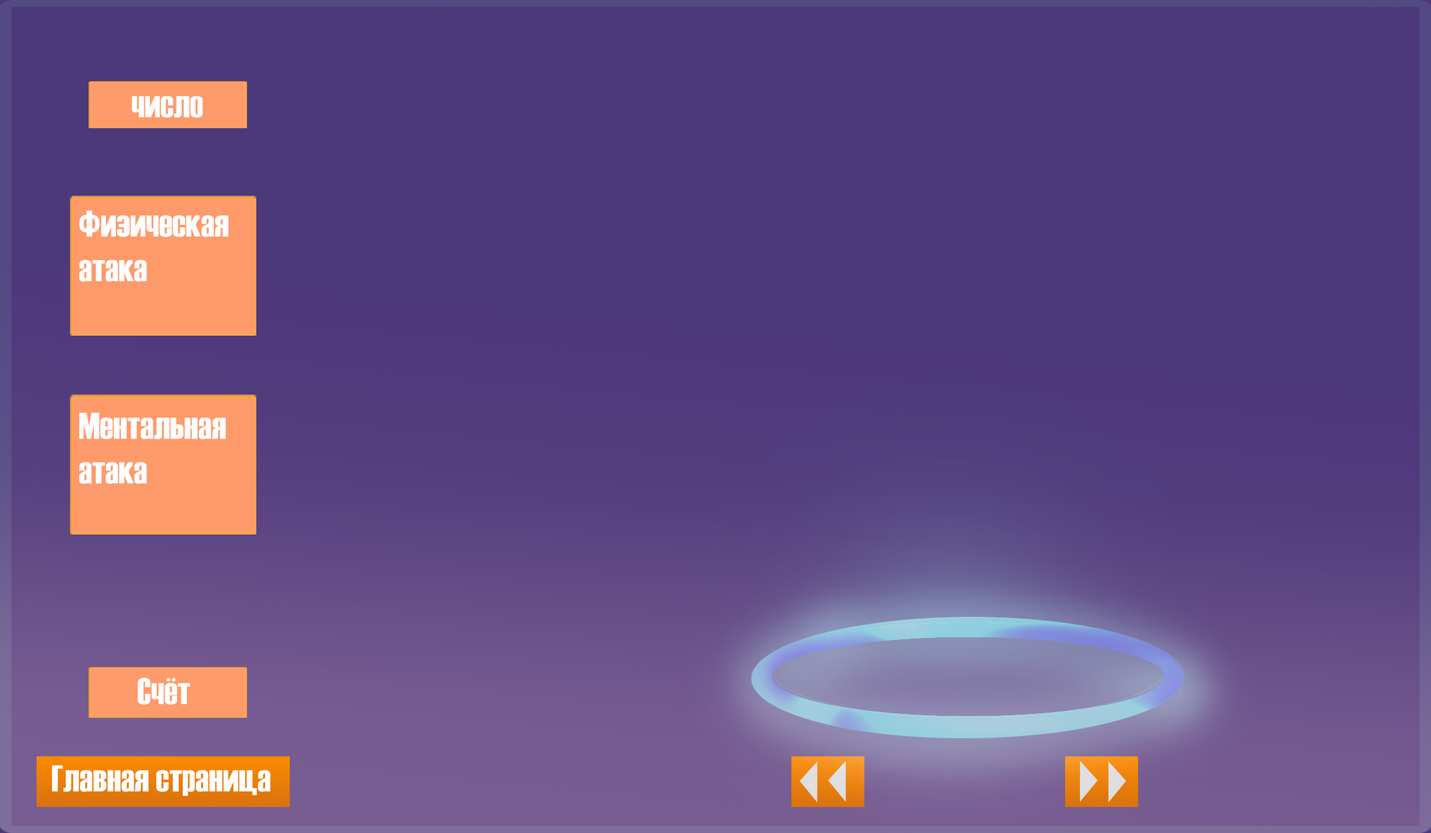
<style>
.page{position:relative;width:1431px;height:833px;background:#4c397b}
.page>*{position:absolute;margin:0}
.t1{font:37.2px "Haettenschweiler";color:#ffffff}
</style>
<div class="page">
<p class="t1" style="left:132px;top:96px;width:71px;height:22px">число</p>
<p class="t1" style="left:79px;top:211px;width:150px;height:71px">Физическая атака</p>
<p class="t1" style="left:79px;top:413px;width:147px;height:71px">Ментальная атака</p>
<p class="t1" style="left:138px;top:678px;width:52px;height:27px">Счёт</p>
<p class="t1" style="left:52px;top:765px;width:219px;height:31px">Главная страница</p>
</div>
